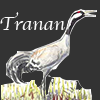
<style>
.page{position:relative;width:100px;height:100px;background:#333333}
.page>*{position:absolute;margin:0}
.t1{font:20px "Apple-Chancery";color:#fbfbfb}
</style>
<div class="page">
<p class="t1" style="left:0px;top:12px;width:65px;height:18px">Tranan</p>
</div>
